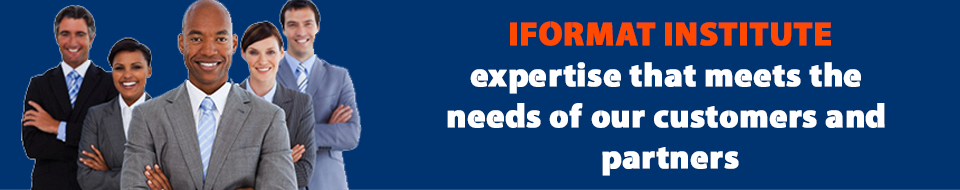
<style>
.page{position:relative;width:960px;height:190px;background:#003471}
.page>*{position:absolute;margin:0}
.t1{font:33.3px/40.9px "Cleanvertising-Black";color:#ffffff;font-weight:bold}
.t2{font:33.3px/40.9px "Cleanvertising-Black";color:#ff4800;font-weight:bold}
</style>
<div class="page">
<p class="t1" style="left:447px;top:21px;width:438px;height:155px;text-align:center"><span class="t2">IFORMAT INSTITUTE<br></span>expertise that meets the <br>needs of our customers and <br>partners</p>
</div>
